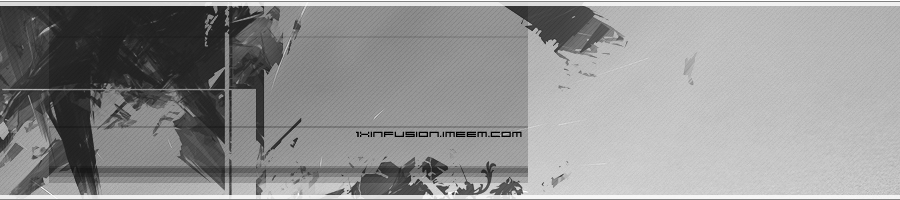
<style>
.page{position:relative;width:900px;height:200px}
.page>*{position:absolute;margin:0}
.t1{font:8px "04b31";letter-spacing:0.001em;color:#000000;text-transform:uppercase}
</style>
<div class="page">
<p class="t1" style="left:356px;top:131px;width:166px;height:6px">1xinfusion.imeem.com</p>
</div>
